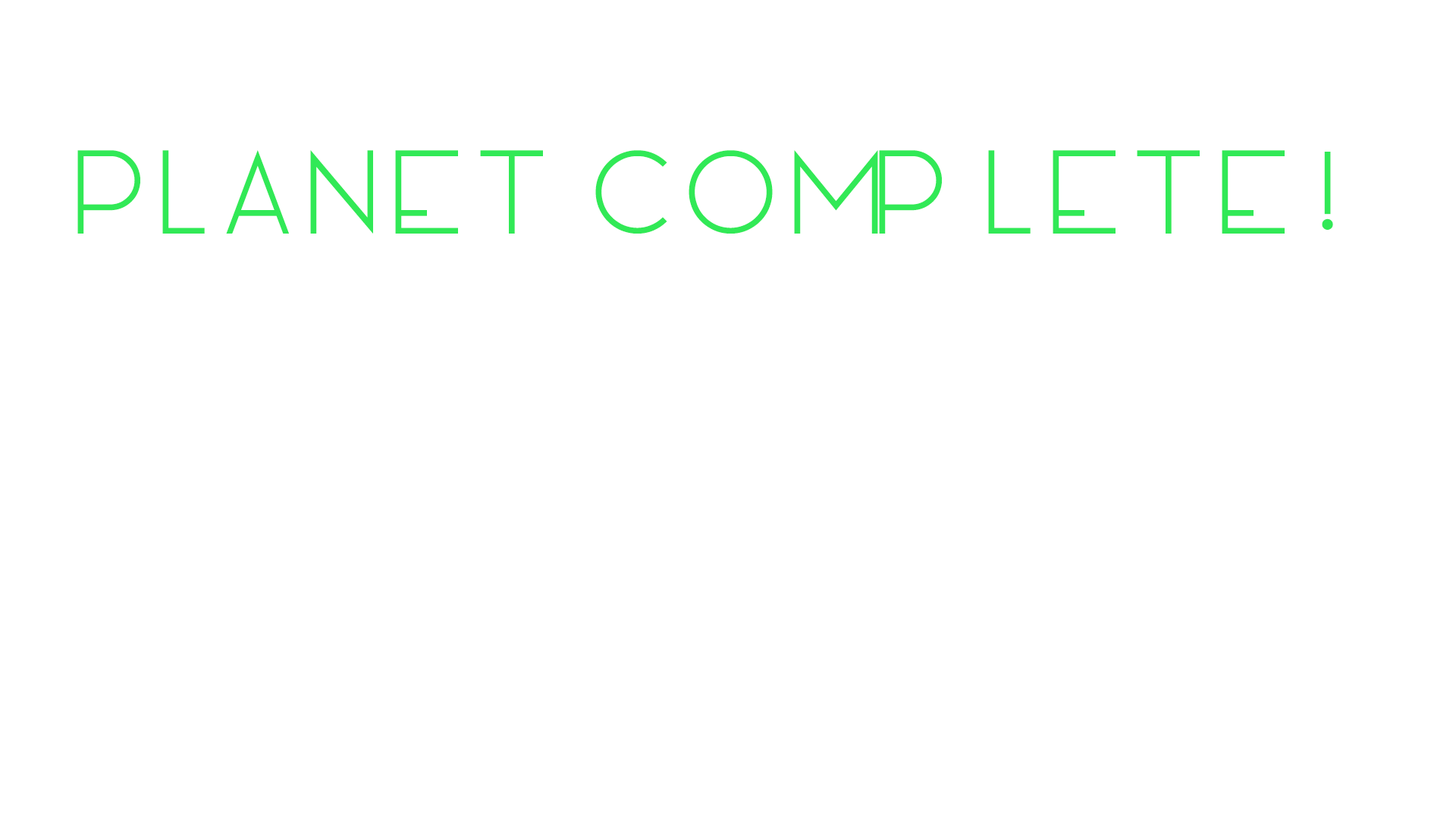
<style>
.page{position:relative;width:1456px;height:819px;background:#ffffff}
.page>*{position:absolute;margin:0}
.t1{font:113.7px "MANIFESTO";color:#31e956}
</style>
<div class="page">
<p class="t1" style="left:77px;top:150px;width:1256px;height:84px">Planet Complete!</p>
</div>
